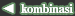
<style>
.page{position:relative;width:75px;height:16px;background:#333333}
.page>*{position:absolute;margin:0}
.t1{font:12px "RyuminPro-ExBold";letter-spacing:-0.06em;color:#ffffff}
.t2{font:14px "TimesNewRomanPSMT";letter-spacing:-0.06em;color:#ffffff}
</style>
<div class="page">
<p class="t1" style="left:3px;top:4px;width:70px;height:10px"><span class="t2">◄   </span>kombinasi</p>
<p class="t1" style="left:3px;top:4px;width:70px;height:10px"><span class="t2">◄   </span>kombinasi</p>
</div>
